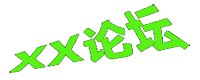
<style>
.page{position:relative;width:200px;height:80px;background:#ffffff}
.page>*{position:absolute;margin:0}
.t1{font:35.8px/6px "MicrosoftYaHei-Bold";letter-spacing:0.05em;color:#58f214;font-style:italic;scale:1.52 1}
</style>
<div class="page">
<p class="t1" style="left:9px;top:5px;width:180px;height:68px;text-align:center">XX论坛</p>
</div>
